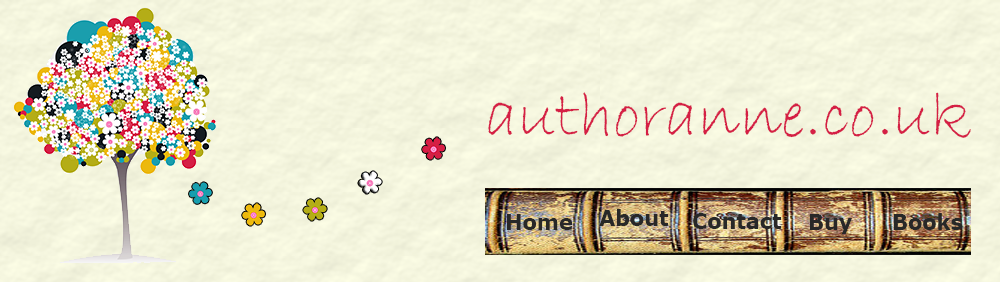
<style>
.page{position:relative;width:1000px;height:282px}
.page>*{position:absolute;margin:0}
.t1{font:66.8px "BradleyHandITC";color:#d51f45}
.t2{font:20.8px "Verdana-Bold";color:#282828}
</style>
<div class="page">
<p class="t1" style="left:488px;top:92px;width:483px;height:46px">authoranne.co.uk</p>
<p class="t2" style="left:599px;top:209px;width:70px;height:17px">About</p>
<p class="t2" style="left:507px;top:214px;width:66px;height:16px">Home</p>
<p class="t2" style="left:693px;top:213px;width:89px;height:16px">Contact</p>
<p class="t2" style="left:809px;top:214px;width:43px;height:20px">Buy</p>
<p class="t2" style="left:893px;top:213px;width:70px;height:17px">Books</p>
</div>
